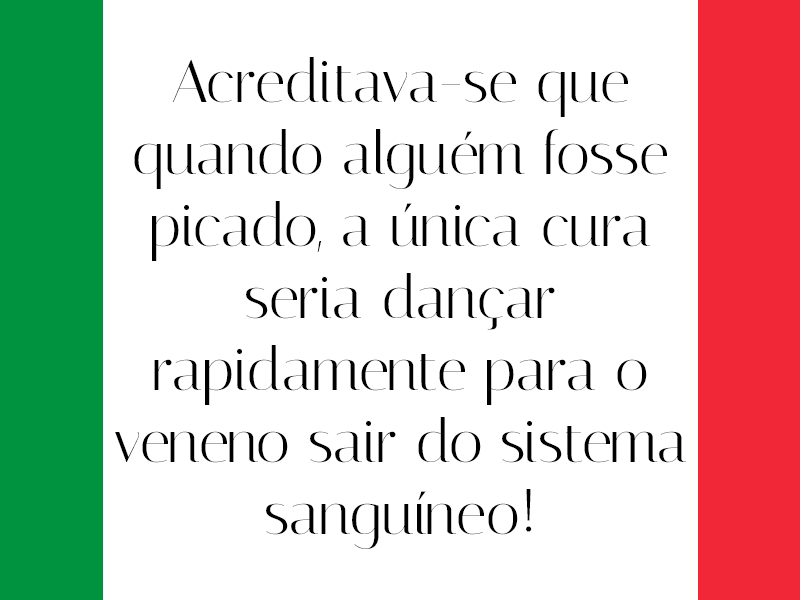
<style>
.page{position:relative;width:800px;height:600px;background:#ffffff}
.page>*{position:absolute;margin:0}
.t1{font:60px "Italiana-Regular";color:#000000}
.t2{font:40px "Italiana-Regular";color:#000000}
</style>
<div class="page">
<p class="t1" style="left:115px;top:57px;width:571px;height:492px;text-align:center"><span class="t2"><br></span>Acreditava-se que quando alguém fosse picado, a única cura seria dançar rapidamente para o veneno sair do sistema sanguíneo!</p>
</div>
